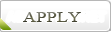
<style>
.page{position:relative;width:111px;height:32px;background:#ffffff}
.page>*{position:absolute;margin:0}
.t1{font:14.9px "TimesNewRomanPSMT";scale:1.23 1}
</style>
<div class="page">
<p class="t1" style="left:23px;top:12px;width:58px;height:10px">APPLY</p>
</div>
